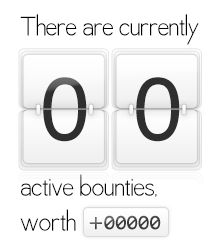
<style>
.page{position:relative;width:220px;height:250px;background:#ffffff}
.page>*{position:absolute;margin:0}
.t1{font:30.4px "QuaverSans";letter-spacing:-0.01em;color:#000000}
.t2{font:89.1px "Helvetica";letter-spacing:-0.01em;color:#2f2f2f}
.t3{font:30.3px/35px "QuaverSans";letter-spacing:-0.01em;color:#000000}
.t4{font:21px "LucidaGrande-Bold";color:#5d5d5d}
.t5{font:21px "AnonymousPro-Bold";color:#3b3b3b}
</style>
<div class="page">
<p class="t1" style="left:20px;top:14px;width:179px;height:31px">There are currently</p>
<p class="t2" style="left:43px;top:77px;width:44px;height:65px">0</p>
<p class="t2" style="left:136px;top:77px;width:44px;height:65px">0</p>
<p class="t3" style="left:20px;top:174px;width:137px;height:57px">active bounties,<br>worth</p>
<p class="t4" style="left:89px;top:217px;width:13px;height:13px">+</p>
<p class="t5" style="left:104px;top:215px;width:57px;height:15px">00000</p>
</div>
